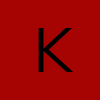
<style>
.page{position:relative;width:100px;height:100px;background:#a60303}
.page>*{position:absolute;margin:0}
.t1{font:62.5px "Muli-Regular";color:#000000}
</style>
<div class="page">
<p class="t1" style="left:38px;top:28px;width:36px;height:44px">K</p>
</div>
